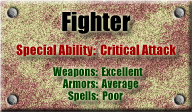
<style>
.page{position:relative;width:192px;height:112px}
.page>*{position:absolute;margin:0}
.t1{font:24px "Impact";color:#000000}
.t2{font:13px "Impact";color:#9c0000}
.t3{font:11px "Impact";color:#003e00}
</style>
<div class="page">
<p class="t1" style="left:62px;top:12px;width:69px;height:22px">Fighter</p>
<p class="t2" style="left:16px;top:44px;width:160px;height:13px">Special Ability:  Critical Attack</p>
<p class="t3" style="left:53px;top:67px;width:90px;height:10px">Weapons:  Excellent</p>
<p class="t3" style="left:62px;top:79px;width:77px;height:11px">Armors:  Average</p>
<p class="t3" style="left:68px;top:91px;width:55px;height:10px">Spells:  Poor</p>
</div>
